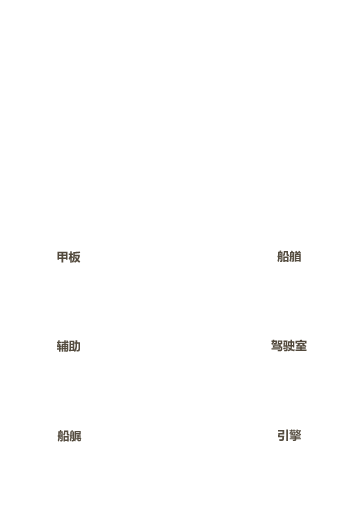
<style>
.page{position:relative;width:360px;height:522px;background:#ffffff}
.page>*{position:absolute;margin:0}
.t1{font:12px "MicrosoftYaHei-Bold";color:#52493c}
.t2{font:12px "MicrosoftYaHei-Bold";color:#564e41}
.t3{font:12px "MicrosoftYaHei-Bold";color:#564d41}
</style>
<div class="page">
<p class="t1" style="left:57px;top:251px;width:24px;height:12px">甲板</p>
<p class="t2" style="left:277px;top:250px;width:24px;height:12px">船艏</p>
<p class="t3" style="left:57px;top:340px;width:23px;height:12px">辅助</p>
<p class="t1" style="left:271px;top:339px;width:36px;height:13px">驾驶室</p>
<p class="t2" style="left:57px;top:430px;width:25px;height:12px">船艉</p>
<p class="t3" style="left:278px;top:429px;width:23px;height:12px">引擎</p>
</div>
